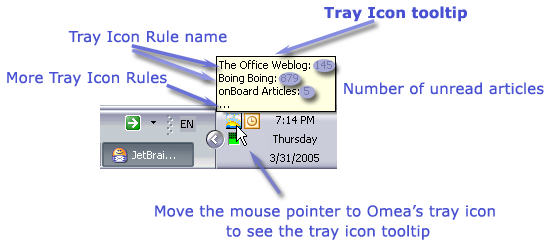
<style>
.page{position:relative;width:549px;height:247px;background:#ffffff}
.page>*{position:absolute;margin:0}
.t1{font:15px "Verdana-Bold";letter-spacing:0.012em;color:#4851d1}
.t2{font:15px "Verdana";letter-spacing:0.012em;color:#4851d1}
.t3{font:15px/10px "Verdana";letter-spacing:0.012em;color:#4851d1}
</style>
<div class="page">
<p class="t1" style="left:324px;top:6px;width:143px;height:16px">Tray Icon tooltip</p>
<p class="t2" style="left:68px;top:30px;width:159px;height:16px">Tray Icon Rule name</p>
<p class="t2" style="left:7px;top:71px;width:160px;height:16px">More Tray Icon Rules</p>
<p class="t2" style="left:344px;top:82px;width:200px;height:13px">Number of unread articles</p>
<p class="t3" style="left:155px;top:205px;width:340px;height:35px;text-align:center">Move the mouse pointer to Omea’s tray icon<br><br> to see the tray icon tooltip</p>
</div>
